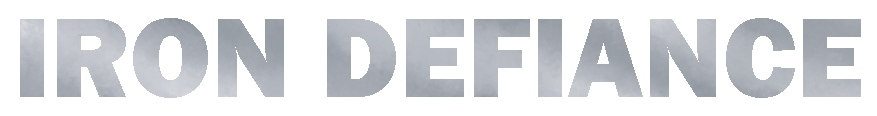
<style>
.page{position:relative;width:877px;height:116px;background:#ffffff}
.page>*{position:absolute;margin:0}
.t1{font:116.7px "FranklinGothic-Heavy";color:#aeb3ba}
</style>
<div class="page">
<p class="t1" style="left:20px;top:18px;width:841px;height:80px">IRON DEFIANCE</p>
</div>
